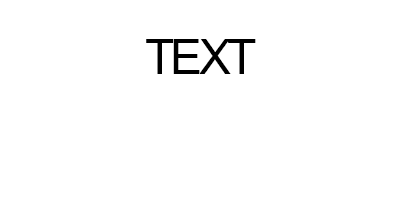
<style>
.page{position:relative;width:400px;height:200px;background:#ffffff}
.page>*{position:absolute;margin:0}
.t1{font:48px "ArialMT";letter-spacing:-0.08em;color:#000000}
</style>
<div class="page">
<p class="t1" style="left:146px;top:39px;width:110px;height:35px">TEXT</p>
</div>
